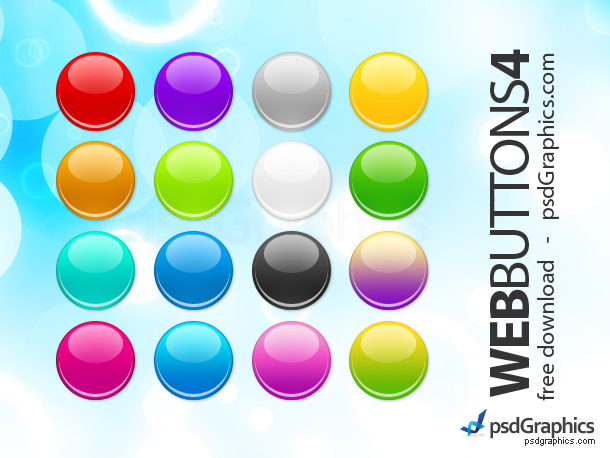
<style>
.page{position:relative;width:610px;height:458px}
.page>*{position:absolute;margin:0}
.t1{font:57px "MyriadPro-Regular";letter-spacing:-0.05em;color:#343434;text-transform:uppercase}
.t2{font:57px "MyriadPro-Bold";letter-spacing:-0.05em;color:#343434;text-transform:uppercase}
.t3{font:23px "MyriadPro-Regular";letter-spacing:0.01em;color:#343434}
.t4{font:9px "ArialMT";color:#343434}
</style>
<div class="page">
<p class="t1" style="left:490px;top:49px;width:39px;height:348px;rotate:-90deg"><span class="t2">Web</span>Buttons<span class="t2">4</span></p>
<p class="t3" style="left:537px;top:53px;width:22px;height:348px;rotate:-90deg">free download   -   psdGraphics.com</p>
<p class="t4" style="left:525px;top:437px;width:70px;height:9px">psdgraphics.com</p>
</div>
